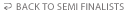
<style>
.page{position:relative;width:130px;height:13px;background:#ffffff}
.page>*{position:absolute;margin:0}
.t1{font:10px "MyriadPro-Regular";letter-spacing:0.025em;color:#787576}
</style>
<div class="page">
<p class="t1" style="left:16px;top:3px;width:108px;height:7px">BACK TO SEMI FINALISTS</p>
</div>
